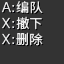
<style>
.page{position:relative;width:64px;height:64px;background:#333333}
.page>*{position:absolute;margin:0}
.t1{font:13px/16px "SourceHanSansSC-Regular";color:#e8e8e8}
</style>
<div class="page">
<p class="t1" style="left:16px;top:1px;width:27px;height:45px">编队<br>撤下<br>删除</p>
</div>
